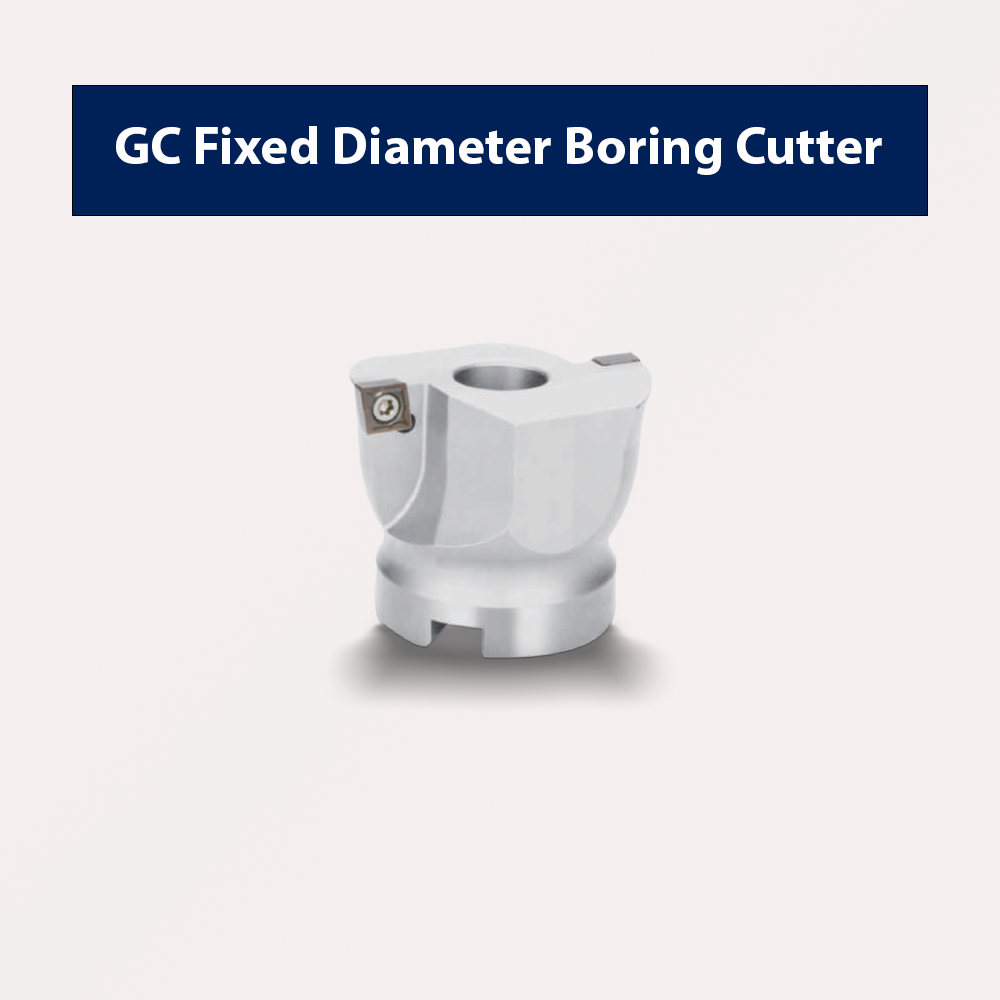
<style>
.page{position:relative;width:1000px;height:1000px;background:#f5efef}
.page>*{position:absolute;margin:0}
.t1{font:53.3px "MyriadPro-Bold";color:#ffffff}
</style>
<div class="page">
<p class="t1" style="left:116px;top:126px;width:766px;height:49px">GC Fixed Diameter Boring Cutter</p>
</div>
